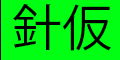
<style>
.page{position:relative;width:120px;height:60px;background:#00ff12}
.page>*{position:absolute;margin:0}
.t1{font:50px "KozGoPr6N-Regular";color:#000000}
</style>
<div class="page">
<p class="t1" style="left:13px;top:4px;width:98px;height:47px">針仮</p>
</div>
